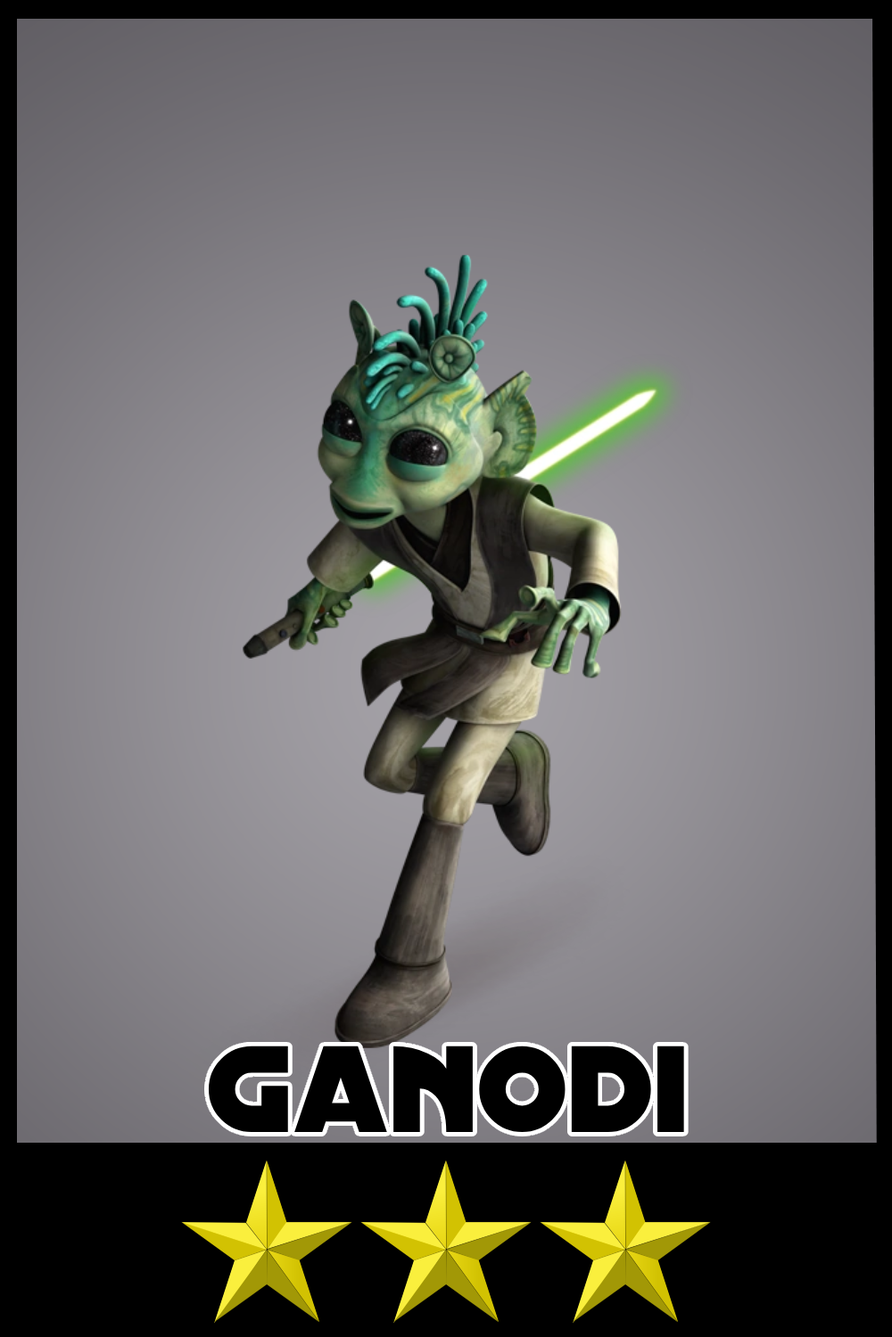
<style>
.page{position:relative;width:892px;height:1337px}
.page>*{position:absolute;margin:0}
.t1{font:131.9px "DistantGalaxy";color:#000000}
</style>
<div class="page">
<p class="t1" style="left:208px;top:1046px;width:476px;height:86px">ganodi</p>
</div>
